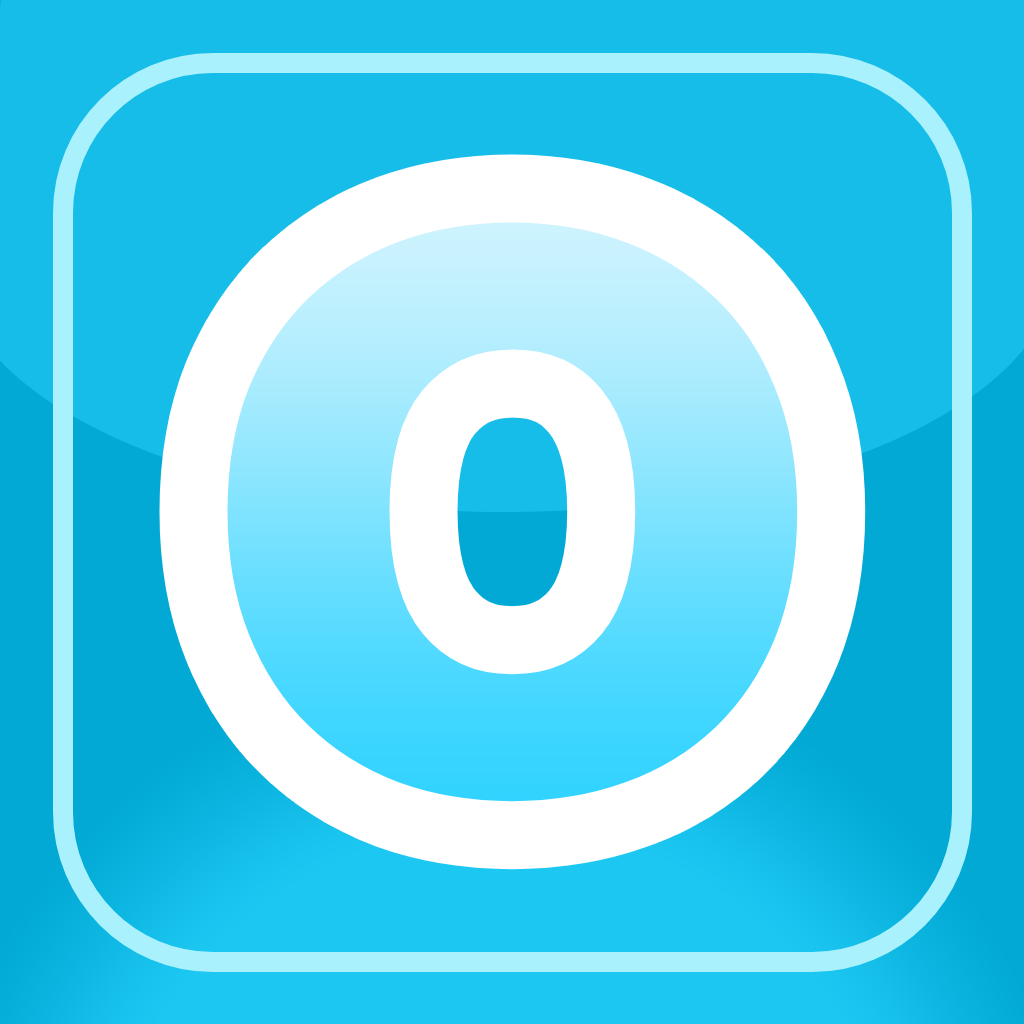
<style>
.page{position:relative;width:1024px;height:1024px;background:#16bde9}
.page>*{position:absolute;margin:0}
.t1{font:900px "Baloo-Regular"}
</style>
<div class="page">
<p class="t1" style="left:227px;top:222px;width:571px;height:580px">O</p>
</div>
